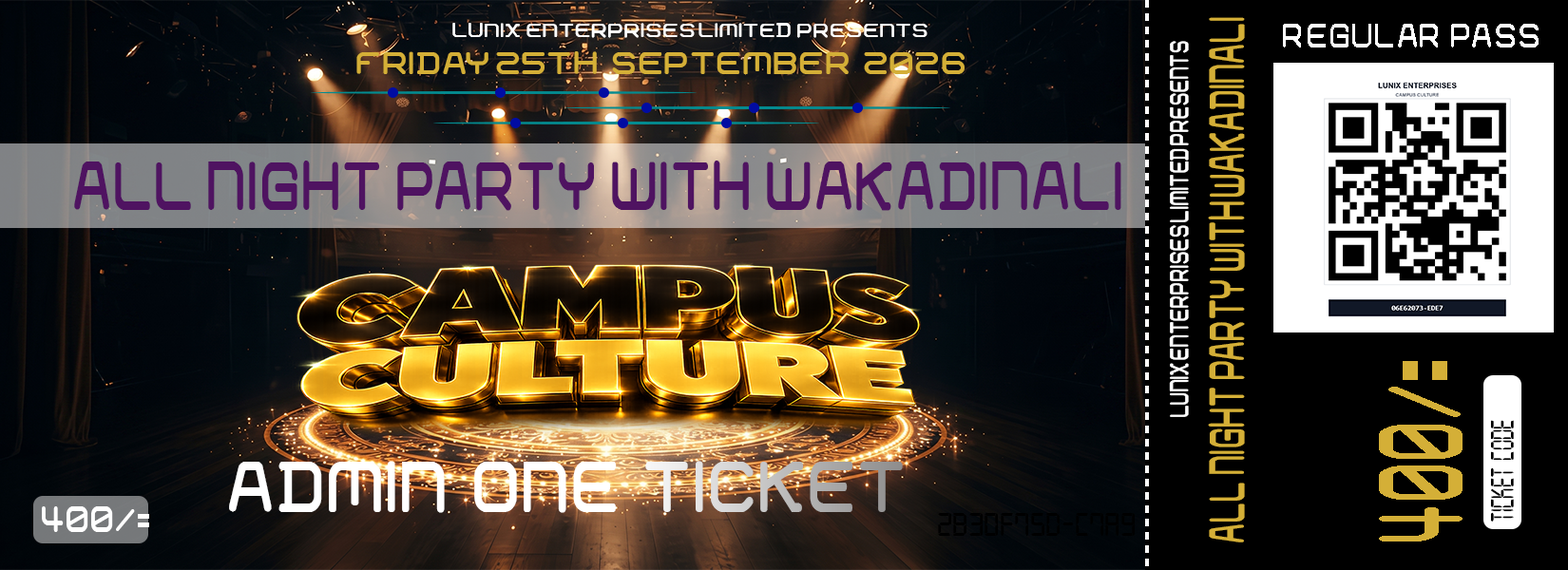
<style>
.page{position:relative;width:1568px;height:570px}
.page>*{position:absolute;margin:0}
.t1{font:49.8px "01-DigitGraphics";color:#d4af37;scale:0.51 1}
.t2{font:19.8px "01-DigitGraphics";color:#ffffff}
.t3{font:34.3px "01-DigitGraphics";letter-spacing:0.02em;color:#ffffff;scale:0.79 1}
.t4{font:26.4px "01-DigitGraphics";color:#ffffff;scale:0.6 1}
.t5{font:31.7px "01-DigitGraphics";color:#d4af37}
.t6{font:68.7px "01-DigitGraphics";color:#4f1361;scale:0.73 1}
.t7{font:119.2px "01-DigitGraphics";letter-spacing:0.02em;color:#d4af37;scale:0.41 1}
.t8{font:34.4px "Digital-7";color:#000000;scale:0.66 1}
.t9{font:72.6px "01-DigitGraphics";color:#ffffff;scale:0.84 1}
.t10{font:36.5px "01-DigitGraphics";color:#ffffff;scale:0.82 1}
.t11{font:35px "Digital-7";color:#000000;scale:0.95 1}
</style>
<div class="page">
<p class="t1" style="left:1208px;top:17px;width:37px;height:526px;rotate:-90deg">ALL  NIGHT  PARTY  WITH WAKADINALI</p>
<p class="t2" style="left:452px;top:23px;width:475px;height:15px">LUNIX  ENTERPRISES LIMITED  PRESENTS</p>
<p class="t3" style="left:1283px;top:24px;width:256px;height:24px">REGULAR  PASS</p>
<p class="t4" style="left:1169px;top:41px;width:20px;height:376px;rotate:-90deg">LUNIX ENTERPRISES LIMITED PRESENTS</p>
<p class="t5" style="left:356px;top:51px;width:609px;height:24px">FRIDAY 25TH   SEPTEMBER   2026</p>
<p class="t6" style="left:74px;top:161px;width:1047px;height:50px">ALL  NIGHT  PARTY  WITH  WAKADINALI</p>
<p class="t7" style="left:1379px;top:361px;width:84px;height:181px;rotate:-90deg">400/=</p>
<p class="t8" style="left:1490px;top:420px;width:24px;height:102px;rotate:-90deg">TICKET CODE</p>
<p class="t9" style="left:229px;top:461px;width:674px;height:52px">ADMIN   ONE   TICKET</p>
<p class="t10" style="left:42px;top:507px;width:107px;height:25px">400/=</p>
<p class="t11" style="left:938px;top:513px;width:197px;height:23px">2B30F75D-C7A9</p>
</div>
